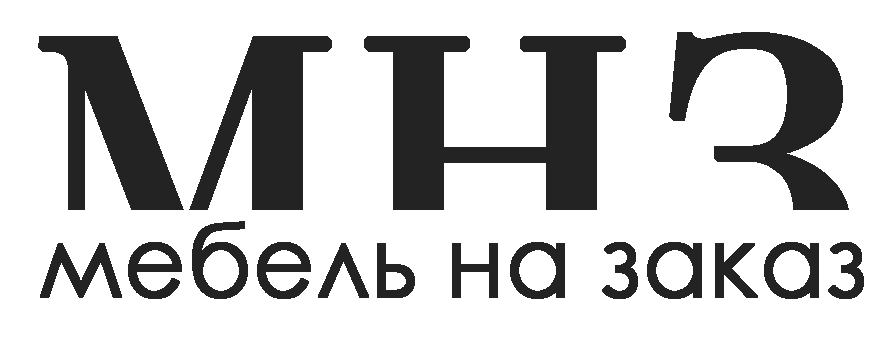
<style>
.page{position:relative;width:883px;height:337px;background:#ffffff}
.page>*{position:absolute;margin:0}
.t1{font:100px "CenturyGothic";color:#232323;font-weight:bold;scale:0.94 1}
</style>
<div class="page">
<p class="t1" style="left:40px;top:221px;width:824px;height:78px">мебель на заказ</p>
</div>
